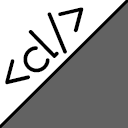
<style>
.page{position:relative;width:128px;height:128px;background:#626262}
.page>*{position:absolute;margin:0}
.t1{font:49.1px "MonoSocialIconsFont";color:#000000}
</style>
<div class="page">
<p class="t1" style="left:5px;top:7px;width:79px;height:78px;rotate:-44deg">&lt;cl/&gt;</p>
</div>
